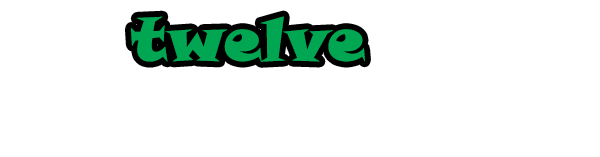
<style>
.page{position:relative;width:600px;height:157px;background:#ffffff}
.page>*{position:absolute;margin:0}
.t1{font:60px "SnapITC-Regular";color:#00a651}
</style>
<div class="page">
<p class="t1" style="left:131px;top:16px;width:234px;height:46px">twelve</p>
</div>
